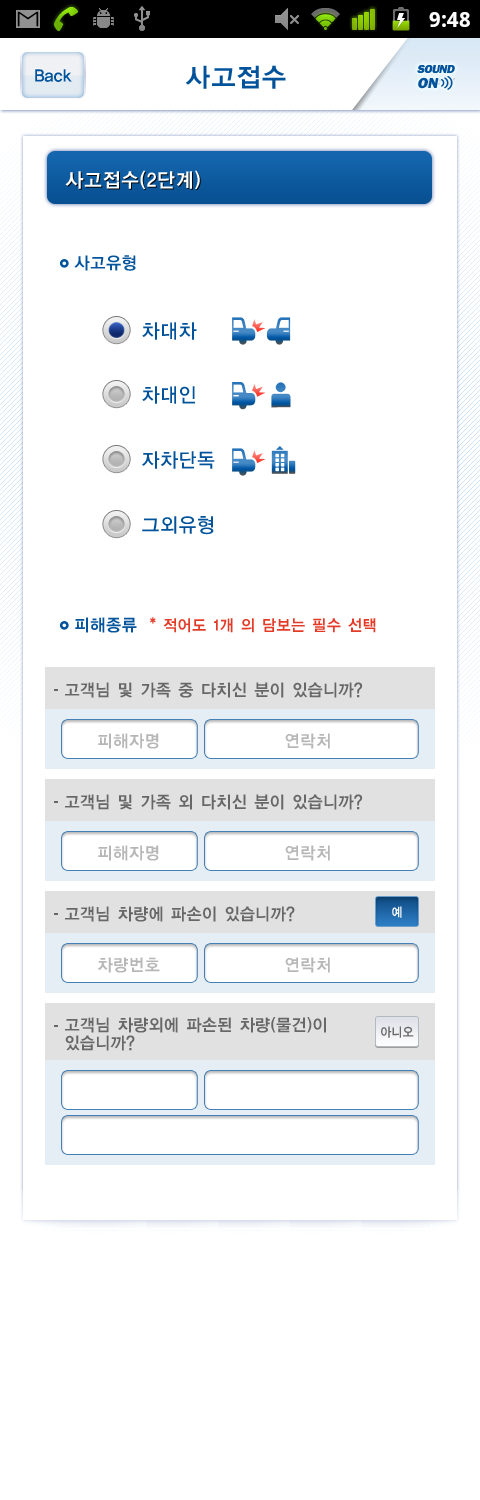
<style>
.page{position:relative;width:480px;height:1500px;background:#ffffff}
.page>*{position:absolute;margin:0}
.t1{font:26px "YDIYGO140-KSCpc-EUC-H";letter-spacing:-0.025em;color:#00529b}
.t2{font:12px/15px "FranklinGothic-Heavy";letter-spacing:-0.05em;color:#00529b;text-transform:uppercase;font-style:italic}
.t3{font:13px/15px "FranklinGothic-Heavy";color:#00529b;text-transform:uppercase;font-style:italic}
.t4{font:15px/15px "FranklinGothic-Heavy";color:#00529b;text-transform:uppercase;font-style:italic}
.t5{font:18px "YDIYGO140-KSCpc-EUC-H";letter-spacing:-0.075em;color:#00529b;scale:0.95 1}
.t6{font:20px "YDIYGO140-KSCpc-EUC-H";letter-spacing:-0.025em;color:#ffffff;scale:0.95 1}
.t7{font:17px "YDIYGO140-KSCpc-EUC-H";letter-spacing:-0.025em;color:#00529b;scale:0.95 1}
.t8{font:20px "YDIYGO130-KSCpc-EUC-H";letter-spacing:-0.025em;color:#00529b;scale:0.95 1}
.t9{font:16px "YDIYGO140-KSCpc-EUC-H";letter-spacing:-0.05em;color:#e43925;scale:0.95 1}
.t10{font:17px "YDIYGO140-KSCpc-EUC-H";letter-spacing:-0.05em;color:#666666;scale:0.95 1}
.t11{font:17px "YDIYGO140-KSCpc-EUC-H";letter-spacing:-0.025em;color:#b6b6b6;scale:0.95 1}
.t12{font:13px "YDIYGO140-KSCpc-EUC-H";letter-spacing:-0.05em;color:#ffffff;scale:0.9 1}
.t13{font:17px/18px "YDIYGO140-KSCpc-EUC-H";letter-spacing:-0.05em;color:#666666;scale:0.95 1}
.t14{font:13px "YDIYGO140-KSCpc-EUC-H";letter-spacing:-0.05em;color:#686868;scale:0.9 1}
</style>
<div class="page">
<p class="t1" style="left:185px;top:65px;width:101px;height:24px">사고접수</p>
<p class="t2" style="left:417px;top:65px;width:38px;height:24px">sound<br><span class="t3">oFF</span></p>
<p class="t2" style="left:417px;top:65px;width:38px;height:24px">sound<br><span class="t4">on</span></p>
<p class="t5" style="left:35px;top:69px;width:37px;height:13px">Back</p>
<p class="t6" style="left:65px;top:170px;width:135px;height:19px">사고접수(2단계)</p>
<p class="t7" style="left:74px;top:255px;width:62px;height:16px">사고유형</p>
<p class="t8" style="left:142px;top:322px;width:55px;height:18px">차대차</p>
<p class="t8" style="left:142px;top:386px;width:53px;height:18px">차대인</p>
<p class="t8" style="left:142px;top:451px;width:73px;height:18px">자차단독</p>
<p class="t8" style="left:142px;top:516px;width:72px;height:19px">그외유형</p>
<p class="t7" style="left:75px;top:617px;width:62px;height:16px">피해종류</p>
<p class="t9" style="left:150px;top:617px;width:226px;height:16px">* 적어도 1개 의 담보는 필수 선택</p>
<p class="t10" style="left:65px;top:682px;width:298px;height:16px">고객님 및 가족 중 다치신 분이 있습니까?</p>
<p class="t11" style="left:98px;top:733px;width:61px;height:16px">피해자명</p>
<p class="t11" style="left:285px;top:733px;width:45px;height:16px">연락처</p>
<p class="t10" style="left:65px;top:794px;width:298px;height:16px">고객님 및 가족 외 다치신 분이 있습니까?</p>
<p class="t11" style="left:98px;top:845px;width:61px;height:16px">피해자명</p>
<p class="t11" style="left:285px;top:845px;width:45px;height:16px">연락처</p>
<p class="t10" style="left:65px;top:906px;width:230px;height:16px">고객님 차량에 파손이 있습니까?</p>
<p class="t12" style="left:392px;top:906px;width:10px;height:12px">예</p>
<p class="t11" style="left:98px;top:957px;width:62px;height:16px">차량번호</p>
<p class="t11" style="left:285px;top:957px;width:45px;height:16px">연락처</p>
<p class="t13" style="left:65px;top:1017px;width:261px;height:34px">고객님 차량외에 파손된 차량(물건)이<br>있습니까?</p>
<p class="t14" style="left:381px;top:1026px;width:33px;height:12px">아니오</p>
</div>
